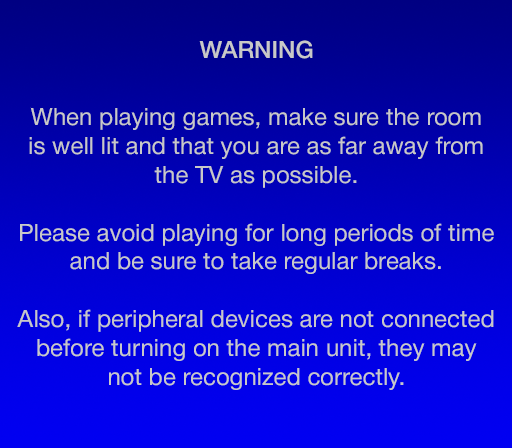
<style>
.page{position:relative;width:512px;height:448px}
.page>*{position:absolute;margin:0}
.t1{font:24px "HelveticaNeue-Medium";color:#c8c8c8}
.t2{font:24px "HelveticaNeue-Roman";color:#c8c8c8}
</style>
<div class="page">
<p class="t1" style="left:199px;top:40px;width:114px;height:19px">WARNING</p>
<p class="t2" style="left:17px;top:107px;width:477px;height:283px;text-align:center">When playing games, make sure the room<br>is well lit and that you are as far away from<br>the TV as possible.<br><br>Please avoid playing for long periods of time<br>and be sure to take regular breaks.<br><br>Also, if peripheral devices are not connected<br>before turning on the main unit, they may<br>not be recognized correctly.</p>
</div>
